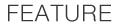
<style>
.page{position:relative;width:120px;height:26px;background:#ffffff}
.page>*{position:absolute;margin:0}
.t1{font:23.2px "HelveticaNeue-Light";letter-spacing:0.05em;color:#3b3738}
</style>
<div class="page">
<p class="t1" style="left:8px;top:4px;width:104px;height:18px">FEATURE</p>
</div>
